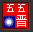
<style>
.page{position:relative;width:33px;height:32px;background:#f20000}
.page>*{position:absolute;margin:0}
.t1{font:10.4px "SimSun";color:#ffffff}
.t2{font:11.7px "SimSun";color:#ffffff}
</style>
<div class="page">
<p class="t1" style="left:7px;top:4px;width:18px;height:8px">五五</p>
<p class="t2" style="left:16px;top:15px;width:11px;height:12px">晋</p>
</div>
